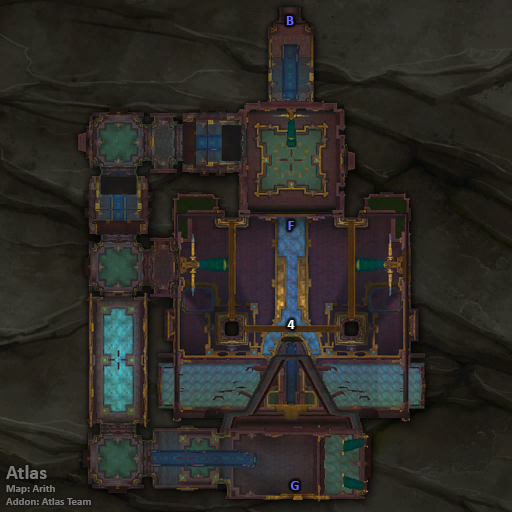
<style>
.page{position:relative;width:512px;height:512px}
.page>*{position:absolute;margin:0}
.t1{font:14px "Calibri-Bold";color:#6666ff}
.t2{font:14px "Calibri-Bold";color:#ffffff}
.t3{font:11px "Calibri-Bold";color:#7d7c7a}
.t4{font:20px "Calibri-Bold";color:#7d7c7a}
</style>
<div class="page">
<p class="t1" style="left:286px;top:16px;width:8px;height:9px">B</p>
<p class="t1" style="left:288px;top:221px;width:6px;height:9px">F</p>
<p class="t2" style="left:287px;top:320px;width:8px;height:9px">4</p>
<p class="t3" style="left:6px;top:465px;width:85px;height:40px"><span class="t4">Atlas<br></span>Map: Arith<br>Addon: Atlas Team</p>
<p class="t1" style="left:290px;top:481px;width:9px;height:9px">G</p>
</div>
